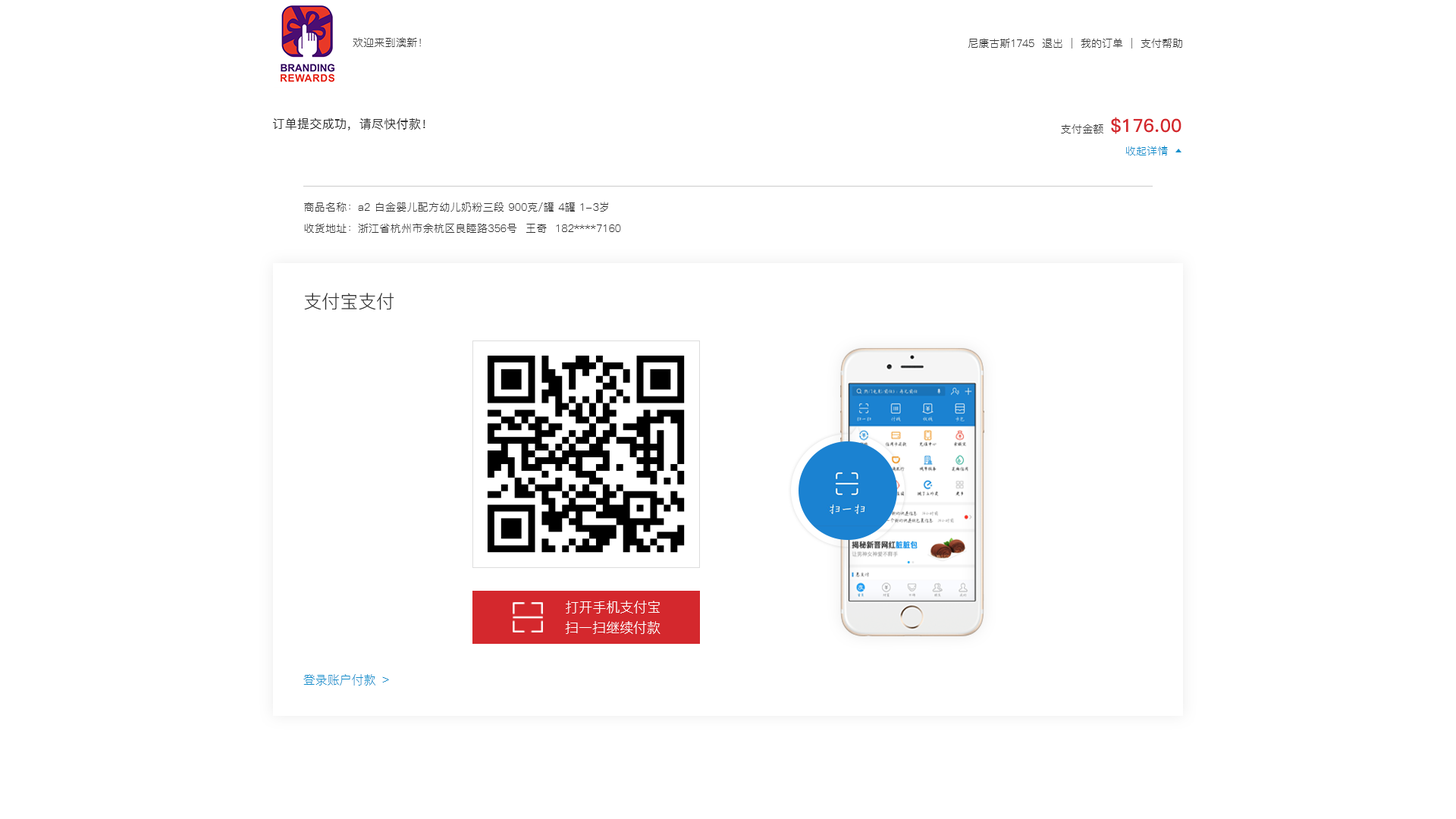
<style>
.page{position:relative;width:1456px;height:819px;background:#ffffff}
.page>*{position:absolute;margin:0}
.t1{font:10.6px "PingFang-SC-Regular";letter-spacing:0.02em;color:#333333}
.t2{font:10.6px "PingFang-SC-Regular";color:#333333}
.t3{font:12.1px "PingFang-SC-Medium";letter-spacing:0.02em;color:#333333}
.t4{font:18.2px "PingFang-SC-Bold";letter-spacing:0.02em;color:#d4282d}
.t5{font:10.6px "PingFang-SC-Regular";letter-spacing:0.02em;color:#148fcc}
.t6{font:18.2px "PingFang-SC-Regular";color:#333333}
.t7{font:13.6px "PingFang-SC-Regular";color:#ffffff}
.t8{font:12.1px "PingFang-SC-Regular";color:#148fcc}
</style>
<div class="page">
<p class="t1" style="left:353px;top:37px;width:68px;height:10px">欢迎来到澳新！</p>
<p class="t2" style="left:968px;top:38px;width:214px;height:11px">尼康古斯1745  退出  |  我的订单  |  支付帮助</p>
<p class="t3" style="left:273px;top:118px;width:152px;height:12px">订单提交成功，请尽快付款！</p>
<p class="t1" style="left:1061px;top:124px;width:42px;height:9px">支付金额</p>
<p class="t4" style="left:1111px;top:117px;width:70px;height:17px">$176.00</p>
<p class="t5" style="left:1125px;top:146px;width:43px;height:9px">收起详情</p>
<p class="t1" style="left:304px;top:202px;width:304px;height:10px">商品名称：a2 白金婴儿配方幼儿奶粉三段 900克/罐 4罐 1-3岁</p>
<p class="t1" style="left:304px;top:223px;width:317px;height:10px">收货地址：浙江省杭州市余杭区良睦路356号  王奇  182****7160</p>
<p class="t6" style="left:304px;top:293px;width:90px;height:17px">支付宝支付</p>
<p class="t7" style="left:566px;top:601px;width:94px;height:12px">打开手机支付宝</p>
<p class="t7" style="left:565px;top:621px;width:95px;height:13px">扫一扫继续付款</p>
<p class="t8" style="left:303px;top:674px;width:86px;height:12px">登录账户付款 ﹥</p>
</div>
